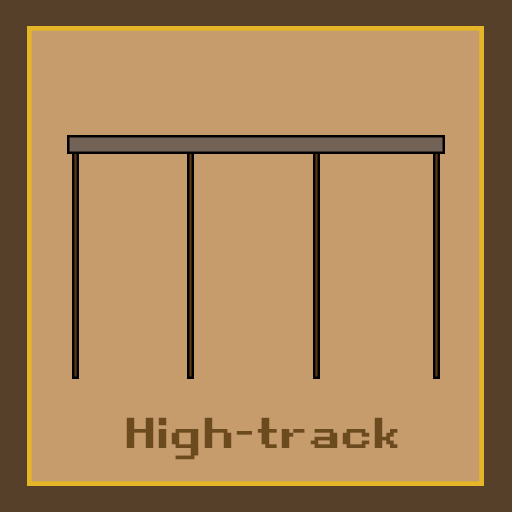
<style>
.page{position:relative;width:512px;height:512px;background:#c69c6d}
.page>*{position:absolute;margin:0}
.t1{font:41.7px "RetroGaming";color:#6b4b1d}
</style>
<div class="page">
<p class="t1" style="left:126px;top:417px;width:272px;height:43px">High-track</p>
</div>
